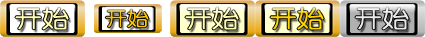
<style>
.page{position:relative;width:425px;height:37px}
.page>*{position:absolute;margin:0}
.t1{font:23.3px "YouYuan";color:#fffeb0;font-weight:bold;scale:1.14 1}
.t2{font:18.6px "YouYuan";color:#ffc600;font-weight:bold;scale:1.14 1}
.t3{font:23.3px "YouYuan";color:#ffd100;font-weight:bold;scale:1.14 1}
.t4{font:23.3px "YouYuan";color:#eaeaea;font-weight:bold;scale:1.14 1}
</style>
<div class="page">
<p class="t1" style="left:15px;top:7px;width:54px;height:23px">开始</p>
<p class="t2" style="left:105px;top:9px;width:44px;height:19px">开始</p>
<p class="t1" style="left:185px;top:7px;width:54px;height:23px">开始</p>
<p class="t3" style="left:270px;top:7px;width:54px;height:23px">开始</p>
<p class="t4" style="left:355px;top:7px;width:54px;height:23px">开始</p>
</div>
